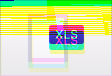
<style>
.page{position:relative;width:112px;height:76px}
.page>*{position:absolute;margin:0}
.t1{font:12px "Helvetica"}
.t2{font:12px "Helvetica";letter-spacing:0.05em}
</style>
<div class="page">
<p class="t1" style="left:55px;top:29px;width:23px;height:10px"><span class="t2">X</span>LS</p>
</div>
